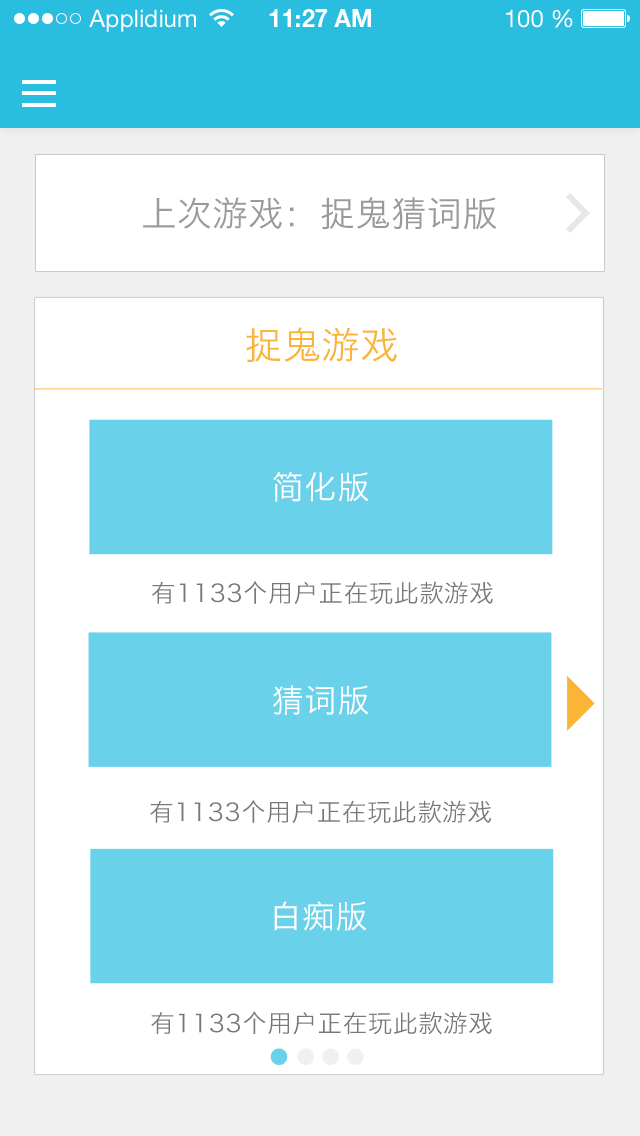
<style>
.page{position:relative;width:640px;height:1136px;background:#ffffff}
.page>*{position:absolute;margin:0}
.t1{font:34.8px "HiraginoSansGB-W3";letter-spacing:0.025em;color:#9a9a9a}
.t2{font:37.7px "HiraginoSansGB-W3";letter-spacing:0.025em;color:#fbb435}
.t3{font:32.1px "HiraginoSansGB-W3";letter-spacing:0.025em;color:#ffffff}
.t4{font:24.5px "HiraginoSansGB-W3";letter-spacing:0.025em;color:#787878}
</style>
<div class="page">
<p class="t1" style="left:143px;top:197px;width:354px;height:33px">上次游戏：捉鬼猜词版</p>
<p class="t2" style="left:246px;top:327px;width:151px;height:35px">捉鬼游戏</p>
<p class="t3" style="left:273px;top:472px;width:96px;height:30px">简化版</p>
<p class="t4" style="left:152px;top:581px;width:341px;height:24px">有1133个用户正在玩此款游戏</p>
<p class="t3" style="left:273px;top:685px;width:96px;height:30px">猜词版</p>
<p class="t4" style="left:150px;top:800px;width:342px;height:24px">有1133个用户正在玩此款游戏</p>
<p class="t3" style="left:274px;top:901px;width:93px;height:30px">白痴版</p>
<p class="t4" style="left:151px;top:1011px;width:341px;height:24px">有1133个用户正在玩此款游戏</p>
</div>
